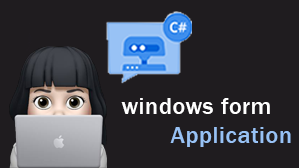
<style>
.page{position:relative;width:299px;height:168px;background:#1f1c1f}
.page>*{position:absolute;margin:0}
.t1{font:24px "FranklinGothic-Medium";letter-spacing:0.025em;color:#ffffff}
.t2{font:24px "FranklinGothic-Medium";letter-spacing:0.025em;color:#98c2f5}
</style>
<div class="page">
<p class="t1" style="left:121px;top:98px;width:170px;height:49px;text-align:center">windows form     <br>      <span class="t2">Application</span></p>
</div>
